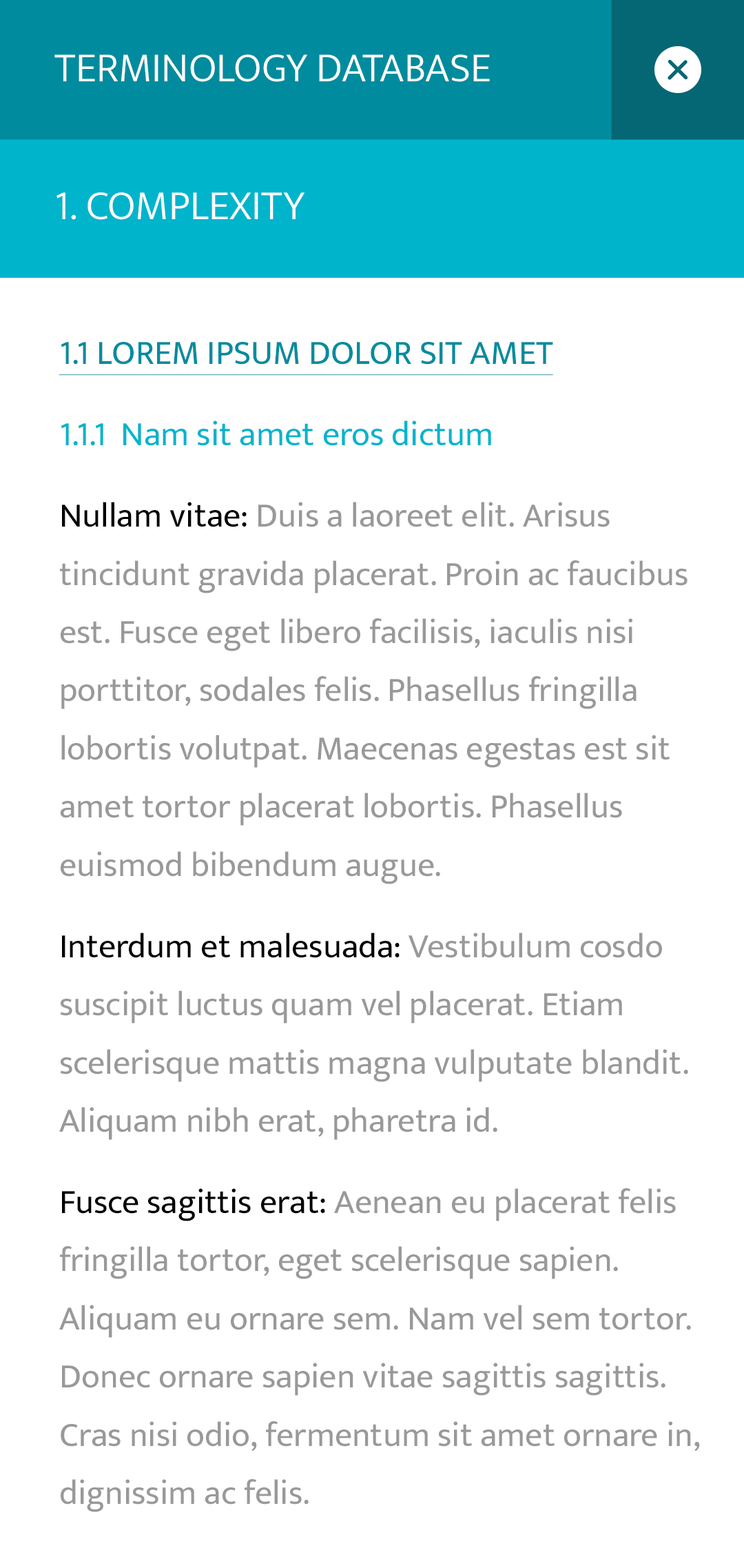
<style>
.page{position:relative;width:744px;height:1568px;background:#ffffff}
.page>*{position:absolute;margin:0}
.t1{font:41.9px "EkMukta-Light";color:#ffffff;text-transform:uppercase}
.t2{font:34.5px/58.2px "EkMukta-Regular";color:#999999}
.t3{font:34.5px/81.4px "EkMukta-Regular";color:#008c9e;text-transform:uppercase;text-decoration:underline}
.t4{font:34.5px/81.4px "EkMukta-Regular";color:#00b4cc}
.t5{font:34.5px/81.4px "EkMukta-Regular";color:#000000}
.t6{font:34.5px/81.4px "EkMukta-Regular";color:#999999}
</style>
<div class="page">
<p class="t1" style="left:54px;top:54px;width:436px;height:28px">Terminology Database</p>
<p class="t1" style="left:57px;top:192px;width:248px;height:28px">1. Complexity</p>
<p class="t2" style="left:59px;top:342px;width:641px;height:1170px"><span class="t3">1.1 Lorem ipsum dolor sit amet<br></span><span class="t4">1.1.1  Nam sit amet eros dictum<br></span><span class="t5">Nullam vitae: </span><span class="t6">Duis a laoreet elit. A</span>risus tincidunt gravida placerat. Proin ac faucibus est. Fusce eget libero facilisis, iaculis nisi porttitor, sodales felis. Phasellus fringilla lobortis volutpat. Maecenas egestas est sit amet tortor placerat lobortis. Phasellus euismod bibendum augue.<br><span class="t5">Interdum et malesuada: </span><span class="t6">Vestibulum cosdo </span>suscipit luctus quam vel placerat. Etiam scelerisque mattis magna vulputate blandit. Aliquam nibh erat, pharetra id.<br><span class="t5">Fusce sagittis erat: </span><span class="t6">Aenean eu placerat felis</span> fringilla tortor, eget scelerisque sapien. Aliquam eu ornare sem. Nam vel sem tortor. Donec ornare sapien vitae sagittis sagittis. Cras nisi odio, fermentum sit amet ornare in, dignissim ac felis.</p>
</div>
